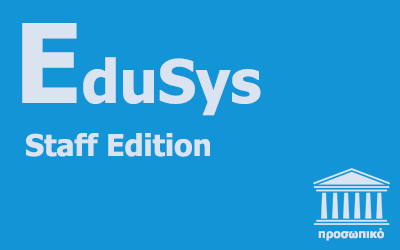
<style>
.page{position:relative;width:400px;height:250px;background:#1294d7}
.page>*{position:absolute;margin:0}
.t1{font:60px "Tahoma-Bold";color:#dae3f0}
.t2{font:110px "Tahoma-Bold";color:#dae3f0}
.t3{font:30px "Tahoma-Bold";color:#dae3f0}
.t4{font:12px "Tahoma-Bold";color:#dae3f0}
</style>
<div class="page">
<p class="t1" style="left:22px;top:23px;width:239px;height:93px"><span class="t2">E</span>duSys</p>
<p class="t3" style="left:26px;top:133px;width:184px;height:24px">Staff Edition</p>
<p class="t4" style="left:318px;top:228px;width:66px;height:13px">προσωπικό</p>
</div>
